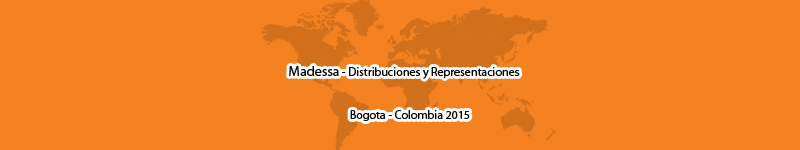
<style>
.page{position:relative;width:800px;height:150px;background:#f58220}
.page>*{position:absolute;margin:0}
.t1{font:12px "MyriadPro-Regular";color:#040404}
.t2{font:14px "MyriadPro-Regular";color:#040404}
</style>
<div class="page">
<p class="t1" style="left:289px;top:66px;width:231px;height:55px"><span class="t2">                                          Madessa</span> - Distribuciones y Representaciones<br><br><br>                                                                         Bogota - Colombia 2015</p>
</div>
